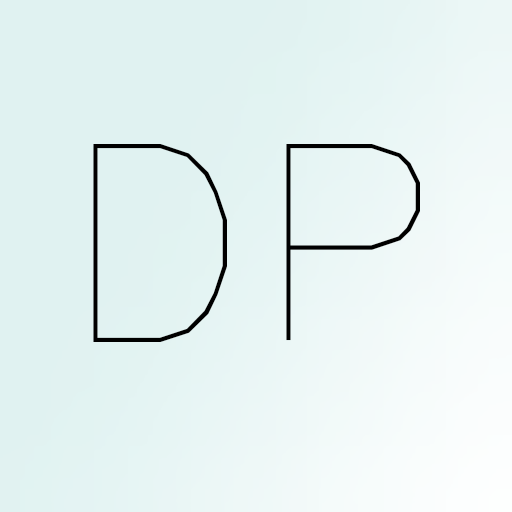
<style>
.page{position:relative;width:512px;height:512px;background:#e0f2f1}
.page>*{position:absolute;margin:0}
.t1{font:263.6px "Simplex";color:#000000}
</style>
<div class="page">
<p class="t1" style="left:93px;top:144px;width:327px;height:198px">DP</p>
</div>
